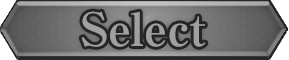
<style>
.page{position:relative;width:289px;height:60px}
.page>*{position:absolute;margin:0}
.t1{font:46px "RyuminPro-ExBold";color:#a0a0a0}
</style>
<div class="page">
<p class="t1" style="left:81px;top:11px;width:125px;height:36px">Select</p>
</div>
